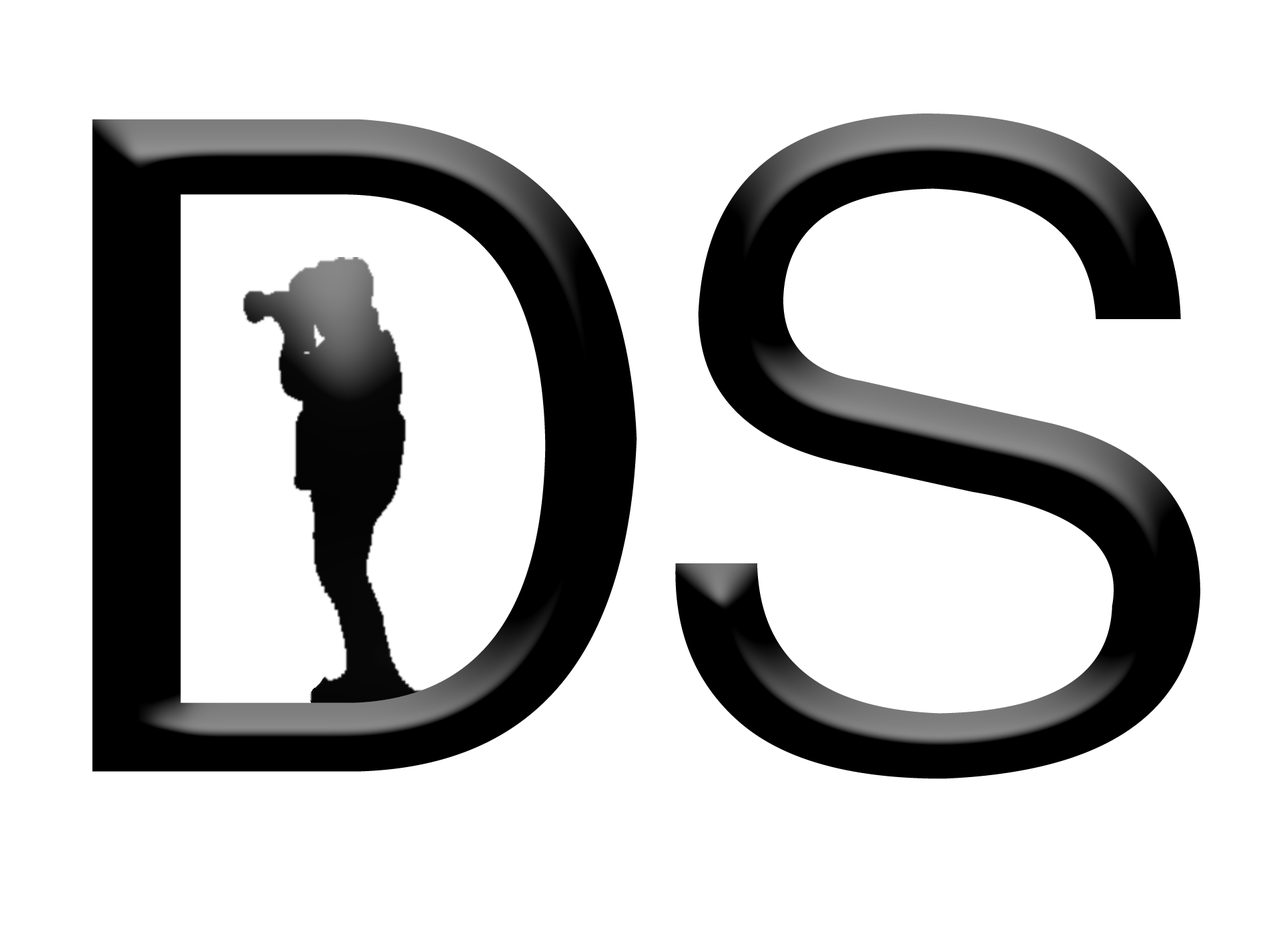
<style>
.page{position:relative;width:1261px;height:946px;background:#ffffff}
.page>*{position:absolute;margin:0}
.t1{font:834.1px "FZYDZHJW--GB1-0";color:#000000}
</style>
<div class="page">
<p class="t1" style="left:92px;top:113px;width:1108px;height:666px">DS</p>
</div>
